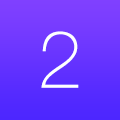
<style>
.page{position:relative;width:120px;height:120px}
.page>*{position:absolute;margin:0}
.t1{font:80px "HelveticaNeue-Thin";color:#fefefe}
</style>
<div class="page">
<p class="t1" style="left:41px;top:31px;width:38px;height:57px">2</p>
</div>
